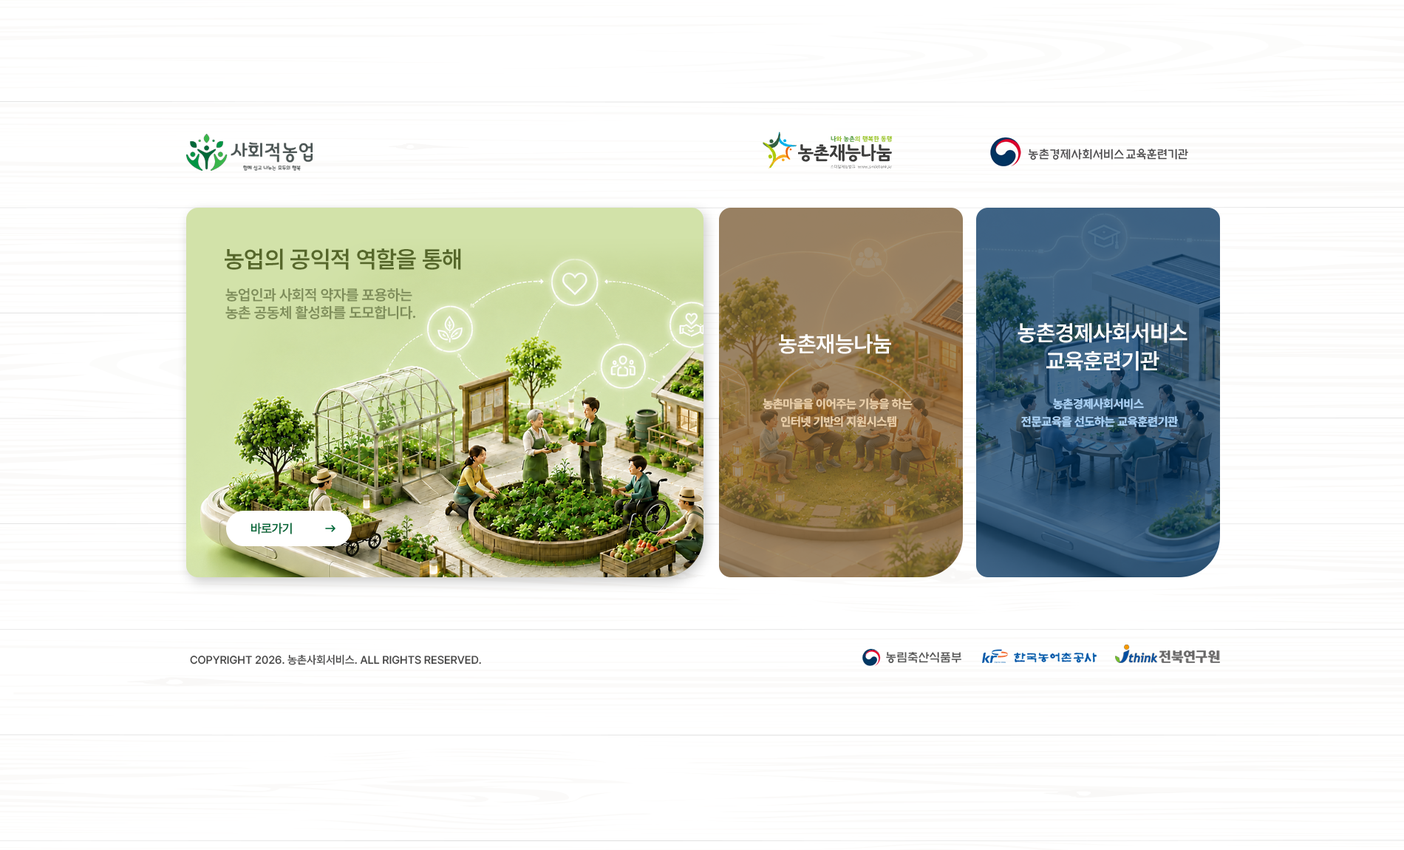
<style>
.page{position:relative;width:1404px;height:850px;background:#ffffff}
.page>*{position:absolute;margin:0}
.t1{font:23.6px "PretendardVariable-SemiBold";letter-spacing:-0.01em;color:#56672a}
.t2{font:14.8px/17.7px "PretendardVariable-SemiBold";letter-spacing:-0.01em;color:#7d8c59}
.t3{font:22.2px/28.1px "PretendardVariable-SemiBold";letter-spacing:-0.01em;color:#ffffff}
.t4{font:22.2px "PretendardVariable-SemiBold";letter-spacing:-0.01em;color:#ffffff}
.t5{font:11.8px/17.7px "PretendardVariable-Bold";letter-spacing:-0.01em;color:#ebd0aa}
.t6{font:11.8px/17.7px "PretendardVariable-Bold";letter-spacing:-0.01em;color:#abd3f7}
.t7{font:12.6px "PretendardVariable-SemiBold";letter-spacing:-0.025em;color:#006838}
.t8{font:11.1px "PretendardVariable-Medium";color:#444444;text-transform:uppercase}
</style>
<div class="page">
<p class="t1" style="left:225px;top:248px;width:236px;height:22px">농업의 공익적 역할을 통해</p>
<p class="t2" style="left:225px;top:287px;width:191px;height:32px">농업인과 사회적 약자를 포용하는 <br>농촌 공동체 활성화를 도모합니다.</p>
<p class="t3" style="left:1017px;top:323px;width:170px;height:48px;text-align:center">농촌경제사회서비스<br>교육훈련기관</p>
<p class="t4" style="left:779px;top:334px;width:112px;height:20px">농촌재능나눔</p>
<p class="t5" style="left:762px;top:398px;width:150px;height:29px;text-align:center">농촌마을을 이어주는 기능을 하는 <br>인터넷 기반의 지원시스템</p>
<p class="t6" style="left:1021px;top:398px;width:157px;height:29px;text-align:center">농촌경제사회서비스 <br>전문교육을 선도하는 교육훈련기관</p>
<p class="t7" style="left:250px;top:522px;width:42px;height:12px">바로가기</p>
<p class="t8" style="left:190px;top:654px;width:291px;height:11px">Copyright 2026. 농촌사회서비스. All rights reserved.</p>
</div>
